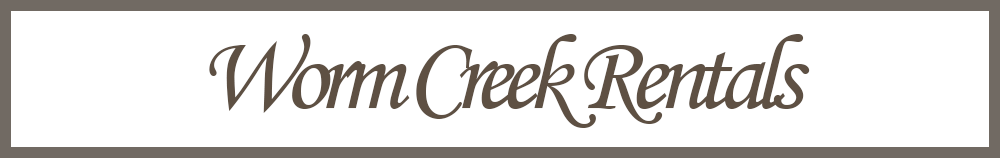
<style>
.page{position:relative;width:1000px;height:158px;background:#ffffff}
.page>*{position:absolute;margin:0}
.t1{font:108px "MonotypeCorsiva";letter-spacing:-0.1em;color:#5e5043}
</style>
<div class="page">
<p class="t1" style="left:209px;top:34px;width:601px;height:94px">Worm Creek Rentals</p>
</div>
